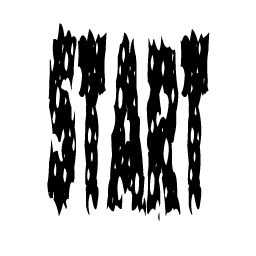
<style>
.page{position:relative;width:256px;height:256px;background:#ffffff}
.page>*{position:absolute;margin:0}
.t1{font:256px "Waterhle";color:#000000;scale:0.2 1}
</style>
<div class="page">
<p class="t1" style="left:47px;top:23px;width:163px;height:198px">START</p>
</div>
